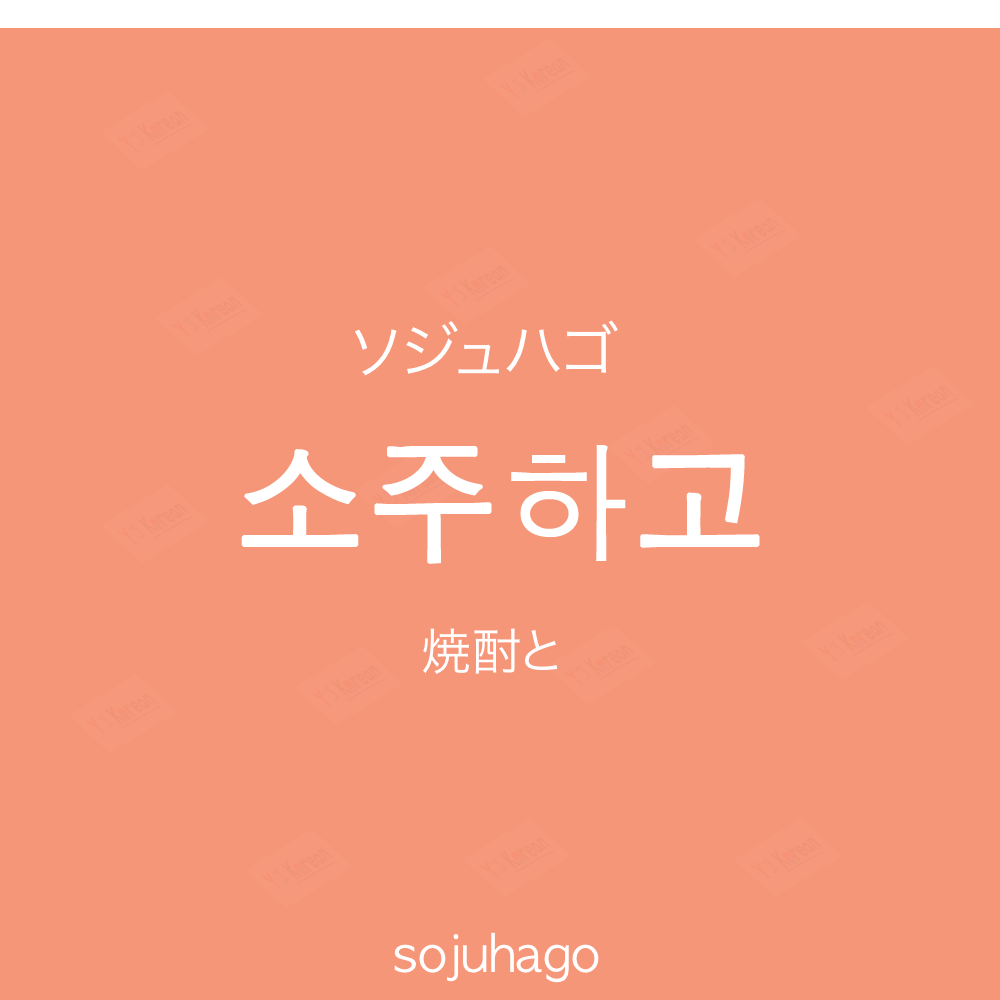
<style>
.page{position:relative;width:1000px;height:1000px;background:#f69679}
.page>*{position:absolute;margin:0}
.t1{font:60px "HiraKakuProN-W3";color:#ffffff;text-transform:uppercase}
.t2{font:130px "AppleGothic";color:#ffffff;font-weight:bold}
.t3{font:50px "HiraKakuProN-W3";color:#ffffff}
.t4{font:50px "AppleGothic";color:#ffffff}
</style>
<div class="page">
<p class="t1" style="left:355px;top:320px;width:263px;height:56px">ソジュハゴ</p>
<p class="t2" style="left:241px;top:445px;width:519px;height:119px">소주하고</p>
<p class="t3" style="left:423px;top:628px;width:134px;height:46px">焼酎と</p>
<p class="t4" style="left:394px;top:932px;width:205px;height:51px">sojuhago</p>
</div>
